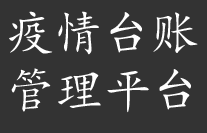
<style>
.page{position:relative;width:207px;height:133px;background:#333333}
.page>*{position:absolute;margin:0}
.t1{font:48px "KaiTi";letter-spacing:0.01em;color:#ffffff}
</style>
<div class="page">
<p class="t1" style="left:9px;top:11px;width:189px;height:44px">疫情台账</p>
<p class="t1" style="left:11px;top:68px;width:180px;height:45px">管理平台</p>
</div>
